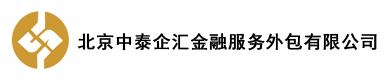
<style>
.page{position:relative;width:387px;height:80px;background:#ffffff}
.page>*{position:absolute;margin:0}
.t1{font:18px "SimHei";letter-spacing:0.02em;color:#000000;font-weight:bold}
</style>
<div class="page">
<p class="t1" style="left:77px;top:33px;width:300px;height:18px">北京中泰企汇金融服务外包有限公司</p>
</div>
